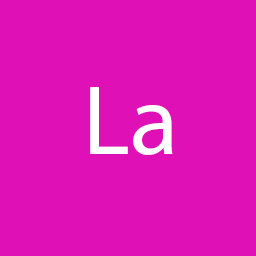
<style>
.page{position:relative;width:256px;height:256px;background:#df10b6}
.page>*{position:absolute;margin:0}
.t1{font:100px "MyriadPro-Regular";color:#ffffff}
</style>
<div class="page">
<p class="t1" style="left:90px;top:87px;width:83px;height:68px">La</p>
</div>
